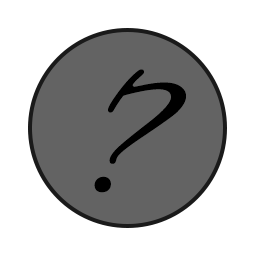
<style>
.page{position:relative;width:256px;height:256px;background:#ffffff}
.page>*{position:absolute;margin:0}
.t1{font:192px "InformalRoman-Regular";color:#000000}
</style>
<div class="page">
<p class="t1" style="left:94px;top:69px;width:92px;height:124px">?</p>
</div>
